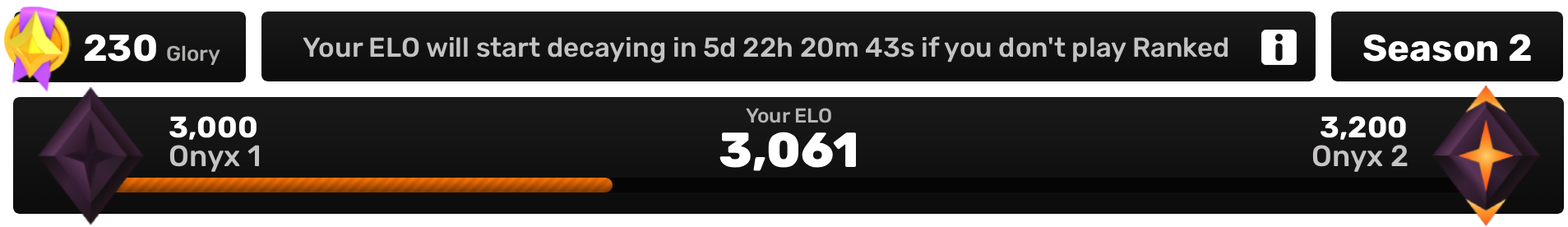
<style>
.page{position:relative;width:1568px;height:227px}
.page>*{position:absolute;margin:0}
.t1{font:37.3px "Rubik-Bold";color:#ffffff}
.t2{font:27.2px "Rubik-Medium";color:#c4c3c3}
.t3{font:37.4px "Rubik-Bold";color:#ffffff}
.t4{font:21.3px "Rubik-Medium";color:#afafae}
.t5{font:20.2px "Rubik-Medium";color:#b5b4b5}
.t6{font:29.7px "Rubik-Bold";color:#ffffff}
.t7{font:49px "Rubik-ExtraBold";color:#ffffff}
.t8{font:29.7px "Rubik-Medium";color:#c6c4c3}
</style>
<div class="page">
<p class="t1" style="left:84px;top:34px;width:72px;height:28px">230</p>
<p class="t2" style="left:303px;top:36px;width:925px;height:27px">Your ELO will start decaying in 5d 22h 20m 43s if you don't play Ranked</p>
<p class="t3" style="left:1363px;top:34px;width:168px;height:28px">Season 2</p>
<p class="t4" style="left:167px;top:45px;width:53px;height:20px">Glory</p>
<p class="t5" style="left:746px;top:108px;width:85px;height:15px">Your ELO</p>
<p class="t6" style="left:169px;top:116px;width:88px;height:24px">3,000</p>
<p class="t6" style="left:1321px;top:116px;width:85px;height:24px">3,200</p>
<p class="t7" style="left:719px;top:132px;width:137px;height:39px">3,061</p>
<p class="t8" style="left:169px;top:145px;width:90px;height:27px">Onyx 1</p>
<p class="t8" style="left:1312px;top:145px;width:96px;height:27px">Onyx 2</p>
</div>
